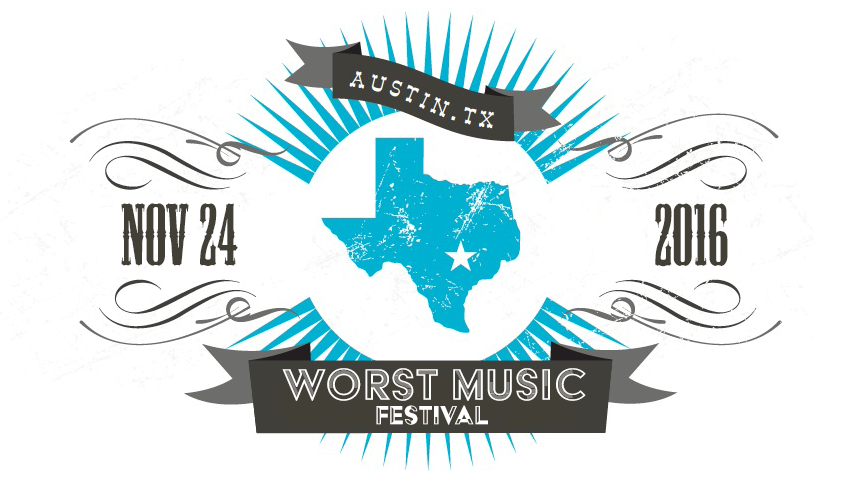
<style>
.page{position:relative;width:860px;height:482px;background:#ffffff}
.page>*{position:absolute;margin:0}
.t1{font:81.6px "MesquiteStd";color:#423f36}
.t2{font:51px "AcierBATText-Gris";color:#ffffff}
.t3{font:30.6px "AcierBATText-Noir";color:#ffffff}
</style>
<div class="page">
<p class="t1" style="left:121px;top:203px;width:117px;height:63px">NOv 24</p>
<p class="t1" style="left:655px;top:203px;width:73px;height:64px">2016</p>
<p class="t2" style="left:282px;top:368px;width:304px;height:33px">Worst Music</p>
<p class="t3" style="left:376px;top:405px;width:112px;height:20px">Festival</p>
</div>
